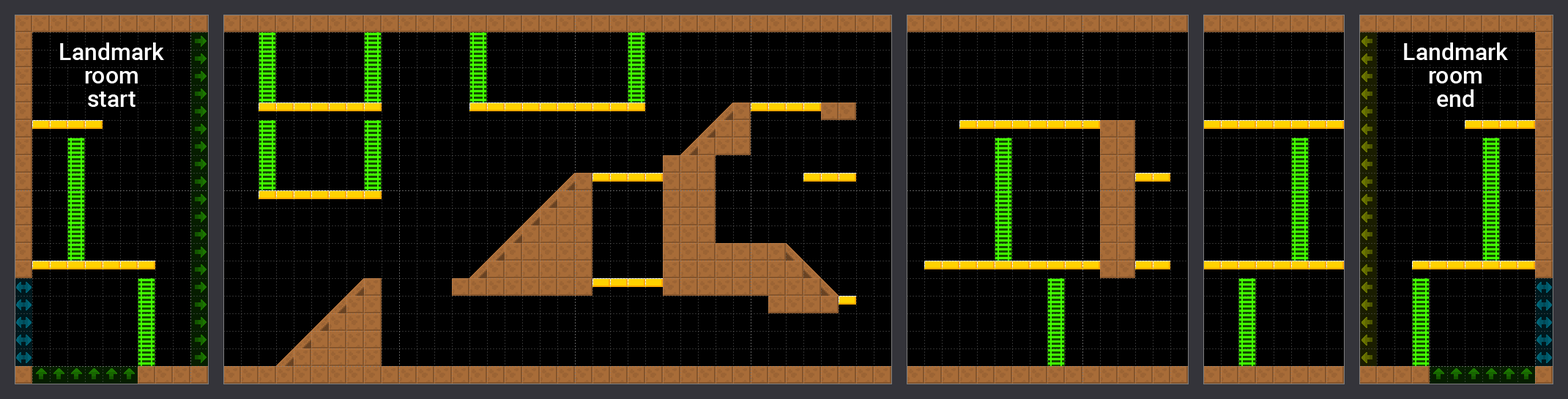
<style>
.page{position:relative;width:1568px;height:399px;background:#000000}
.page>*{position:absolute;margin:0}
.t1{font:23.4px/23.4px "Roboto-Medium";color:#ffffff}
</style>
<div class="page">
<p class="t1" style="left:60px;top:42px;width:104px;height:65px;text-align:center">Landmark<br>room<br>start</p>
<p class="t1" style="left:1404px;top:42px;width:104px;height:65px;text-align:center">Landmark<br>room<br>end</p>
</div>
